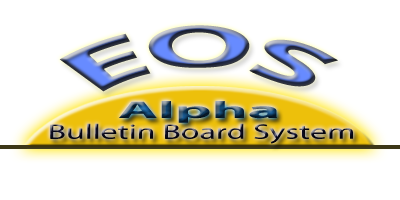
<style>
.page{position:relative;width:400px;height:200px;background:#ffffff}
.page>*{position:absolute;margin:0}
.t1{font:61.8px "MyriadPro-Bold";scale:1.55 1}
.t2{font:24px "MyriadPro-Bold";scale:2.56 1}
.t3{font:21.2px "MyriadPro-Regular";color:#00000a;scale:1.59 1}
</style>
<div class="page">
<p class="t1" style="left:59px;top:25px;width:279px;height:67px">EOS</p>
<p class="t2" style="left:119px;top:101px;width:158px;height:22px">Alpha</p>
<p class="t3" style="left:50px;top:123px;width:303px;height:21px">Bulletin Board System</p>
</div>
